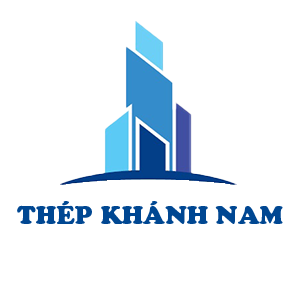
<style>
.page{position:relative;width:300px;height:300px;background:#ffffff}
.page>*{position:absolute;margin:0}
.t1{font:25px "CooperBlackStd";color:#004792}
</style>
<div class="page">
<p class="t1" style="left:17px;top:201px;width:266px;height:23px">THÉP KHÁNH NAM</p>
</div>
